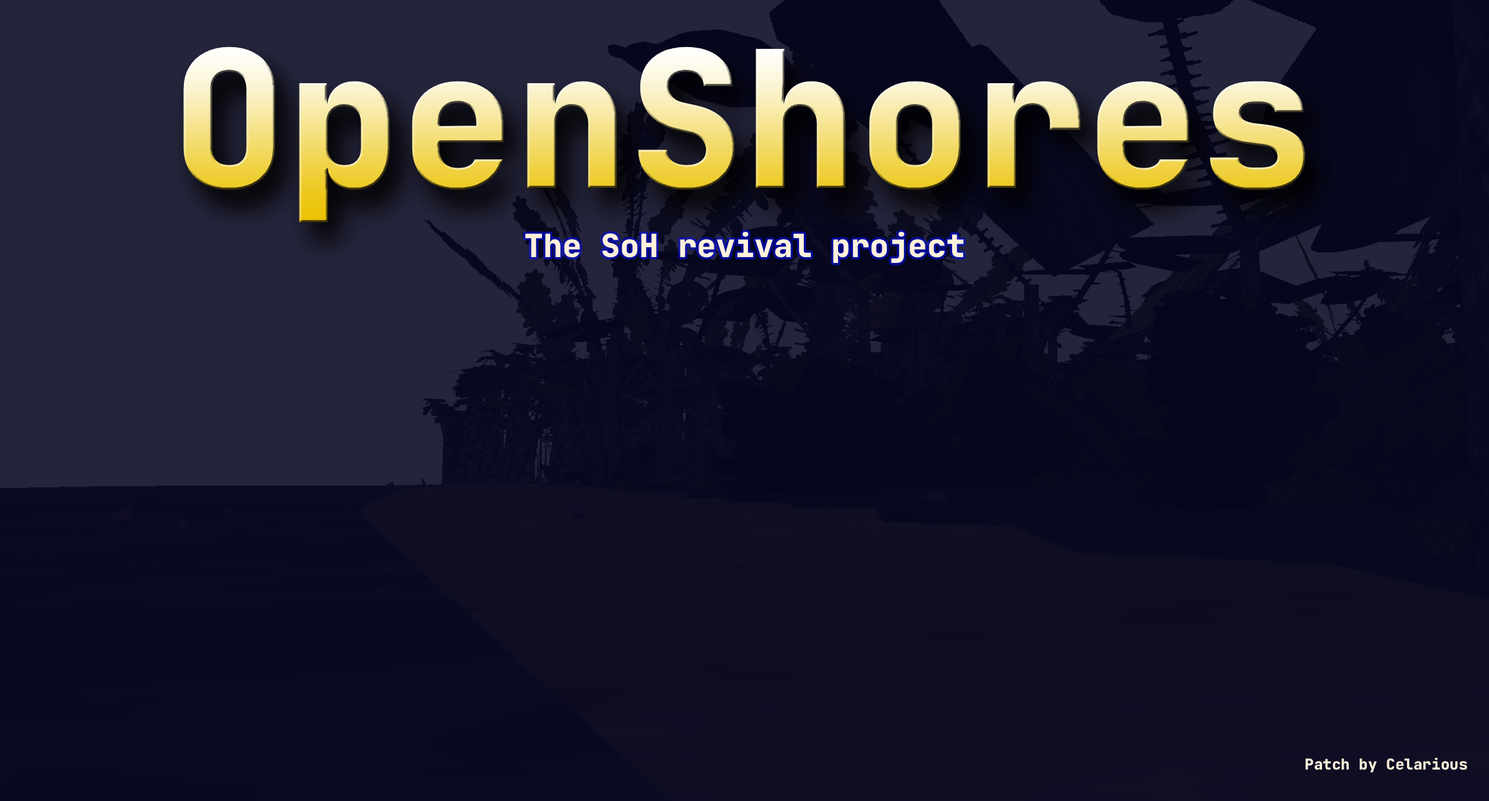
<style>
.page{position:relative;width:1489px;height:801px}
.page>*{position:absolute;margin:0}
.t1{font:190.3px "JetBrainsMonoRoman-ExtraBold"}
.t2{font:32px "JetBrainsMonoRoman-ExtraBold";color:#fff1db}
.t3{font:15.1px "JetBrainsMonoRoman-ExtraBold";color:#fff1db}
</style>
<div class="page">
<p class="t1" style="left:183px;top:47px;width:1122px;height:175px">OpenShores</p>
<p class="t2" style="left:525px;top:231px;width:439px;height:32px">The SoH revival project</p>
<p class="t3" style="left:1305px;top:757px;width:162px;height:15px">Patch by Celarious</p>
</div>
